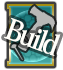
<style>
.page{position:relative;width:63px;height:70px}
.page>*{position:absolute;margin:0}
.t1{font:30px "HeiseiMinStd-W7";letter-spacing:-0.08em;color:#fffef9;scale:0.9 1}
</style>
<div class="page">
<p class="t1" style="left:4px;top:17px;width:57px;height:39px;rotate:20deg">Build</p>
</div>
